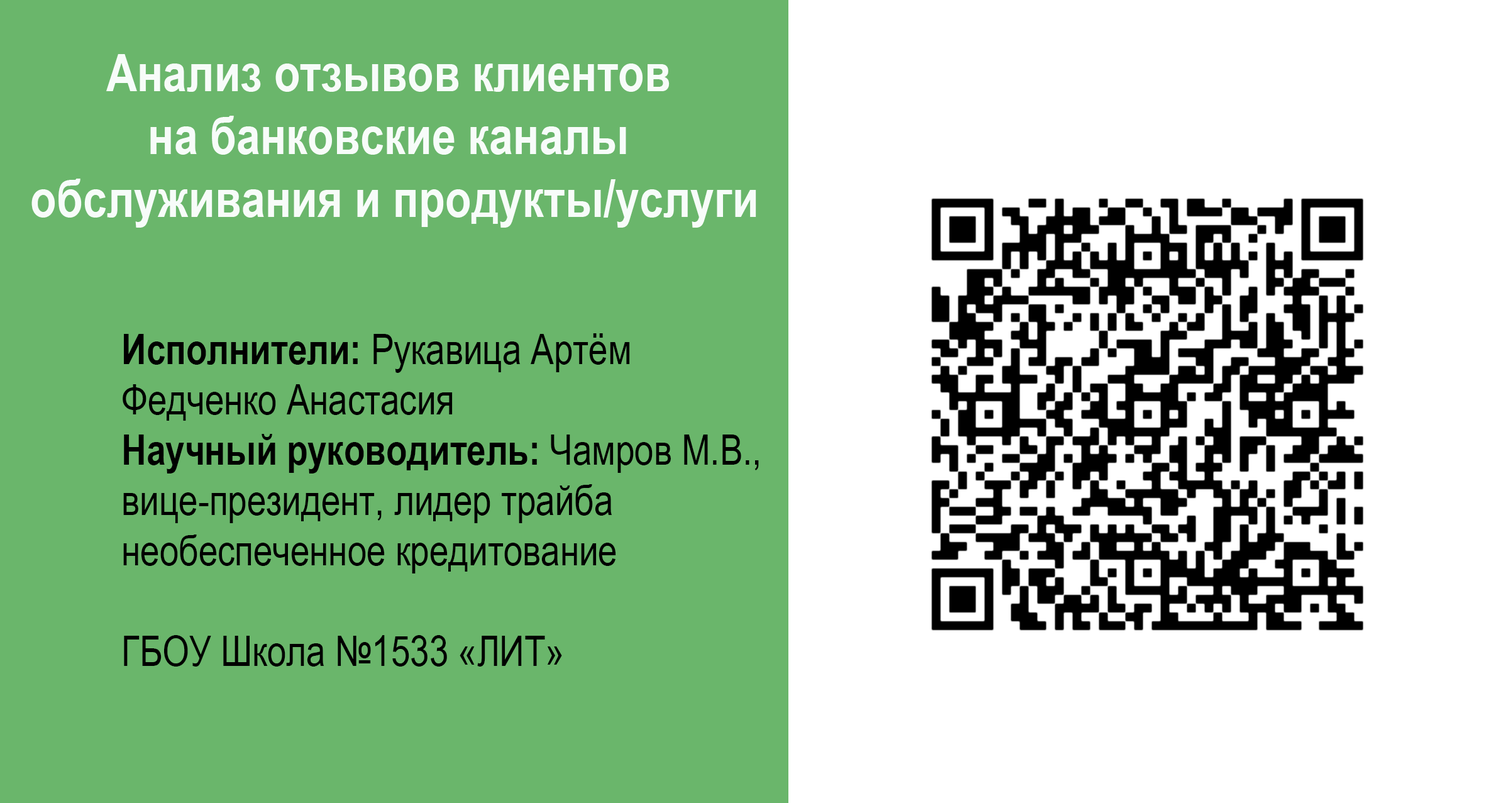
<style>
.page{position:relative;width:1485px;height:803px;background:#6ab66b}
.page>*{position:absolute;margin:0}
.t1{font:52.4px "ArialNarrow-Bold";color:#f7fcf9}
.t2{font:41.9px "ArialNarrow";color:#000000}
.t3{font:41.9px "ArialNarrow-Bold";color:#000000}
.t4{font:36.7px "ArialNarrow-Bold";color:#000000}
</style>
<div class="page">
<p class="t1" style="left:31px;top:54px;width:725px;height:174px;text-align:center">Анализ отзывов клиентов <br>на банковские каналы <br>обслуживания и продукты/услуги</p>
<p class="t2" style="left:123px;top:333px;width:636px;height:333px"><span class="t3">Исполнители: </span>Рукавица Артём<br>Федченко Анастасия<br><span class="t3">Научный руководитель: </span>Чамров М.В., <br>вице-президент, лидер трайба <br>необеспеченное кредитование<br><br>ГБОУ Школа №1533 «ЛИТ» <br><br><span class="t4"><br></span><span class="t3"></span></p>
</div>
